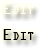
<style>
.page{position:relative;width:41px;height:48px;background:#ffffff}
.page>*{position:absolute;margin:0}
.t1{font:17px "OCRAExtended";color:#ffffff;font-variant:small-caps}
.t2{font:17px "OCRAExtended";color:#000000;font-variant:small-caps}
</style>
<div class="page">
<p class="t1" style="left:3px;top:3px;width:30px;height:11px">Edit</p>
<p class="t2" style="left:3px;top:29px;width:31px;height:11px">Edit</p>
</div>
